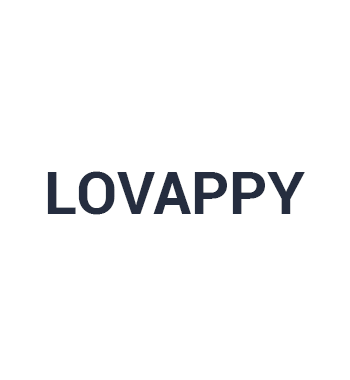
<style>
.page{position:relative;width:350px;height:380px;background:#ffffff}
.page>*{position:absolute;margin:0}
.t1{font:60px "Roboto-Bold";color:#252d3f}
</style>
<div class="page">
<p class="t1" style="left:47px;top:171px;width:258px;height:44px">LOVAPPY</p>
</div>
